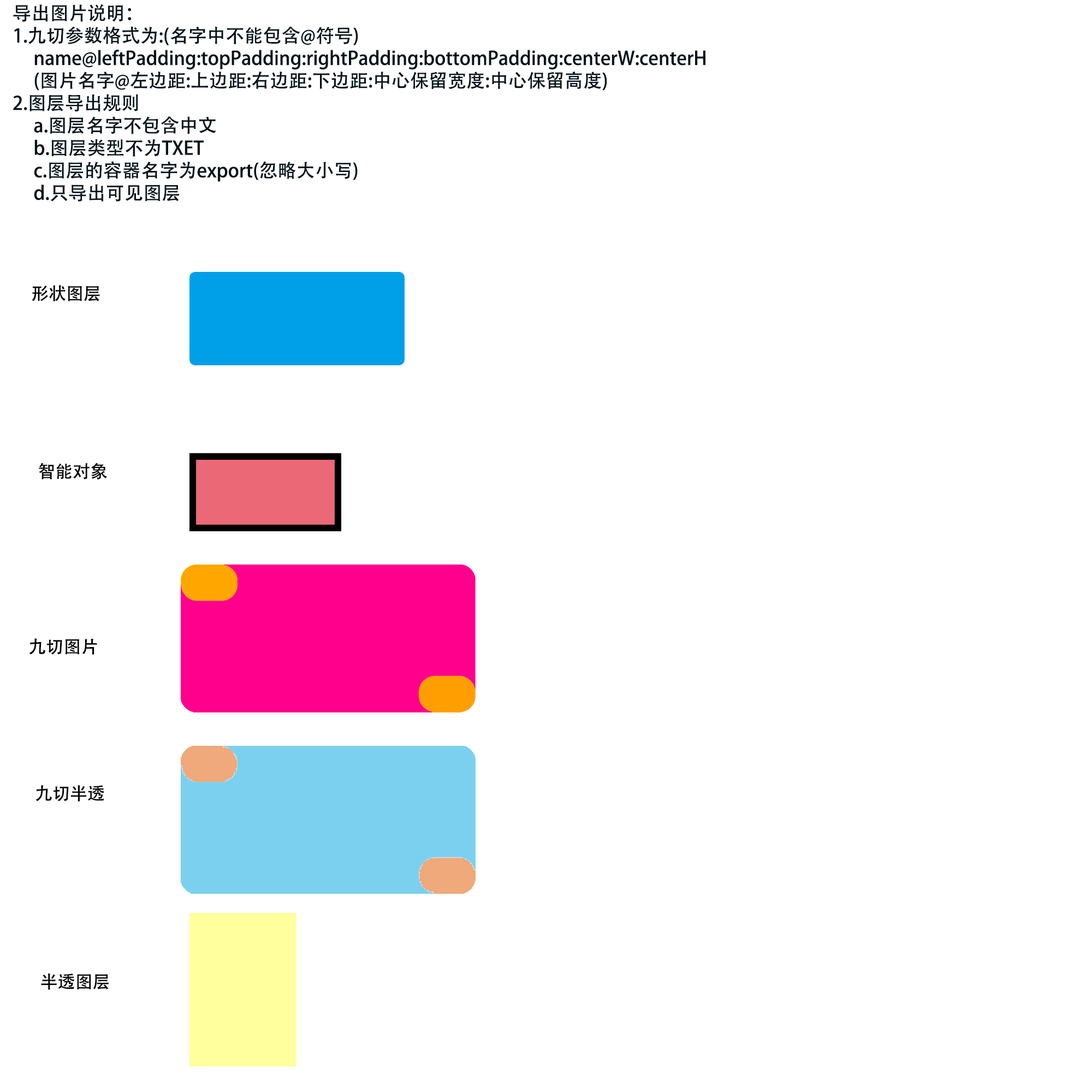
<style>
.page{position:relative;width:1092px;height:1092px;background:#ffffff}
.page>*{position:absolute;margin:0}
.t1{font:18.7px "AdobeHeitiStd-Regular";color:#00131c}
.t2{font:17.5px "AdobeHeitiStd-Regular";color:#000000}
.t3{font:17.5px "AdobeHeitiStd-Regular";color:#060300}
</style>
<div class="page">
<p class="t1" style="left:13px;top:4px;width:692px;height:197px">导出图片说明：<br>1.九切参数格式为:(名字中不能包含@符号)<br> name@leftPadding:topPadding:rightPadding:bottomPadding:centerW:centerH<br> (图片名字@左边距:上边距:右边距:下边距:中心保留宽度:中心保留高度)<br>2.图层导出规则<br> a.图层名字不包含中文<br> b.图层类型不为TXET<br> c.图层的容器名字为export(忽略大小写)<br> d.只导出可见图层</p>
<p class="t2" style="left:32px;top:285px;width:68px;height:16px">形状图层</p>
<p class="t2" style="left:39px;top:462px;width:68px;height:18px">智能对象</p>
<p class="t2" style="left:29px;top:638px;width:68px;height:17px">九切图片</p>
<p class="t3" style="left:35px;top:785px;width:69px;height:17px">九切半透</p>
<p class="t2" style="left:41px;top:974px;width:68px;height:16px">半透图层</p>
</div>
